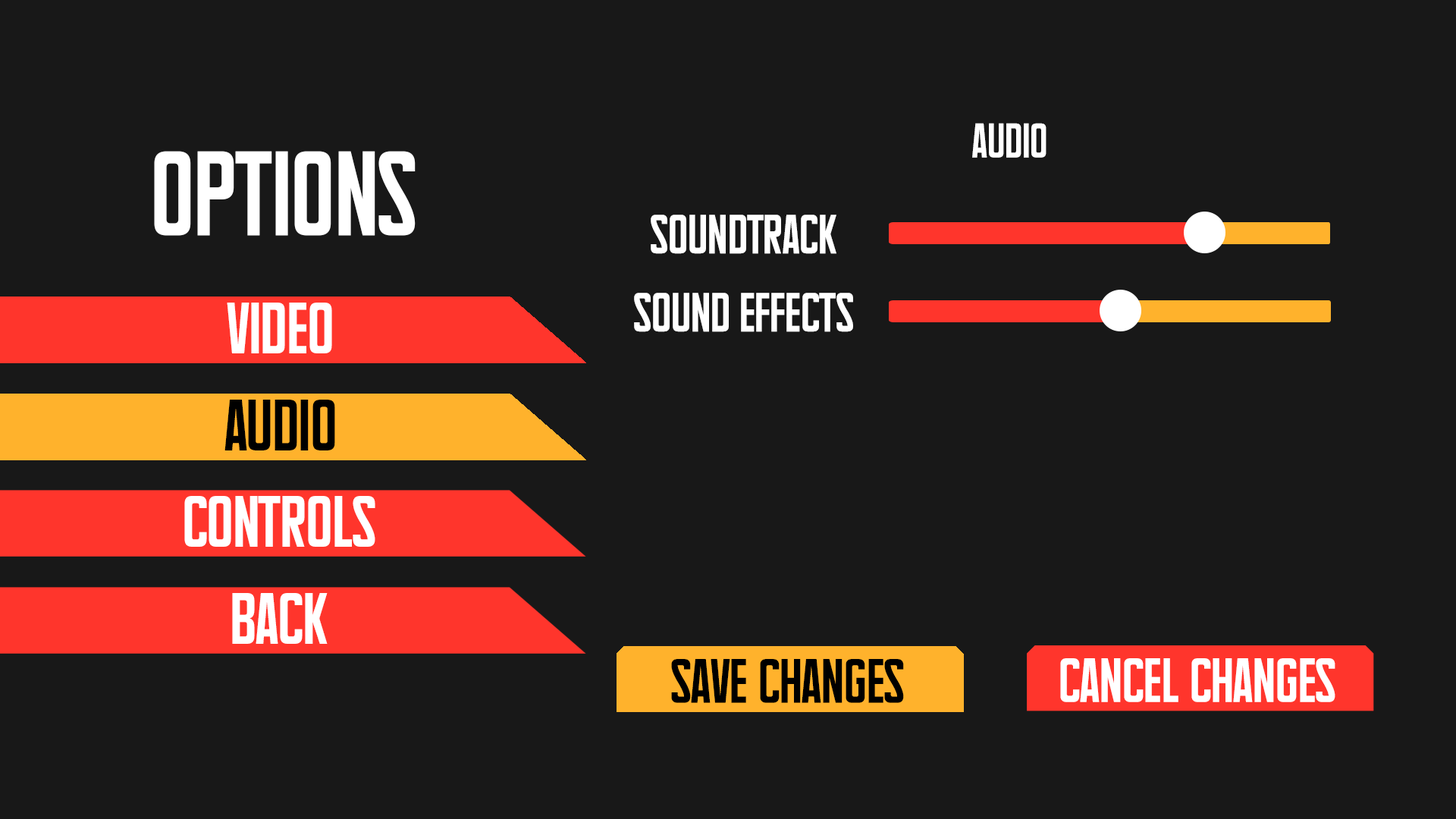
<style>
.page{position:relative;width:1456px;height:819px;background:#181818}
.page>*{position:absolute;margin:0}
.t1{font:33.2px "Supertalls";color:#ffffff}
.t2{font:82.1px "Supertalls";color:#ffffff}
.t3{font:37.7px "Supertalls";color:#ffffff}
.t4{font:49.5px "Supertalls";color:#ffffff}
.t5{font:49.5px "Supertalls";color:#000000}
.t6{font:42.7px "Supertalls";color:#000000}
.t7{font:42.7px "Supertalls";color:#ffffff}
</style>
<div class="page">
<p class="t1" style="left:972px;top:123px;width:74px;height:35px">AUDIO</p>
<p class="t2" style="left:154px;top:151px;width:262px;height:85px">options</p>
<p class="t3" style="left:651px;top:215px;width:185px;height:39px">SOUNDTRACK</p>
<p class="t3" style="left:634px;top:293px;width:219px;height:39px">sound effects</p>
<p class="t4" style="left:227px;top:303px;width:105px;height:50px">VIDEO</p>
<p class="t5" style="left:224px;top:400px;width:111px;height:50px">audio</p>
<p class="t4" style="left:184px;top:496px;width:191px;height:51px">controls</p>
<p class="t4" style="left:232px;top:593px;width:96px;height:51px">back</p>
<p class="t6" style="left:671px;top:659px;width:233px;height:44px">save changes</p>
<p class="t7" style="left:1060px;top:658px;width:275px;height:44px">CANCEL changes</p>
</div>
